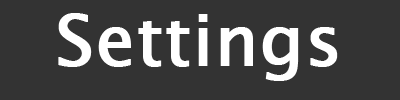
<style>
.page{position:relative;width:400px;height:100px;background:#333333}
.page>*{position:absolute;margin:0}
.t1{font:70px "LucidaSansUnicode";color:#ffffff;font-weight:bold}
</style>
<div class="page">
<p class="t1" style="left:58px;top:13px;width:280px;height:68px">Settings</p>
</div>
